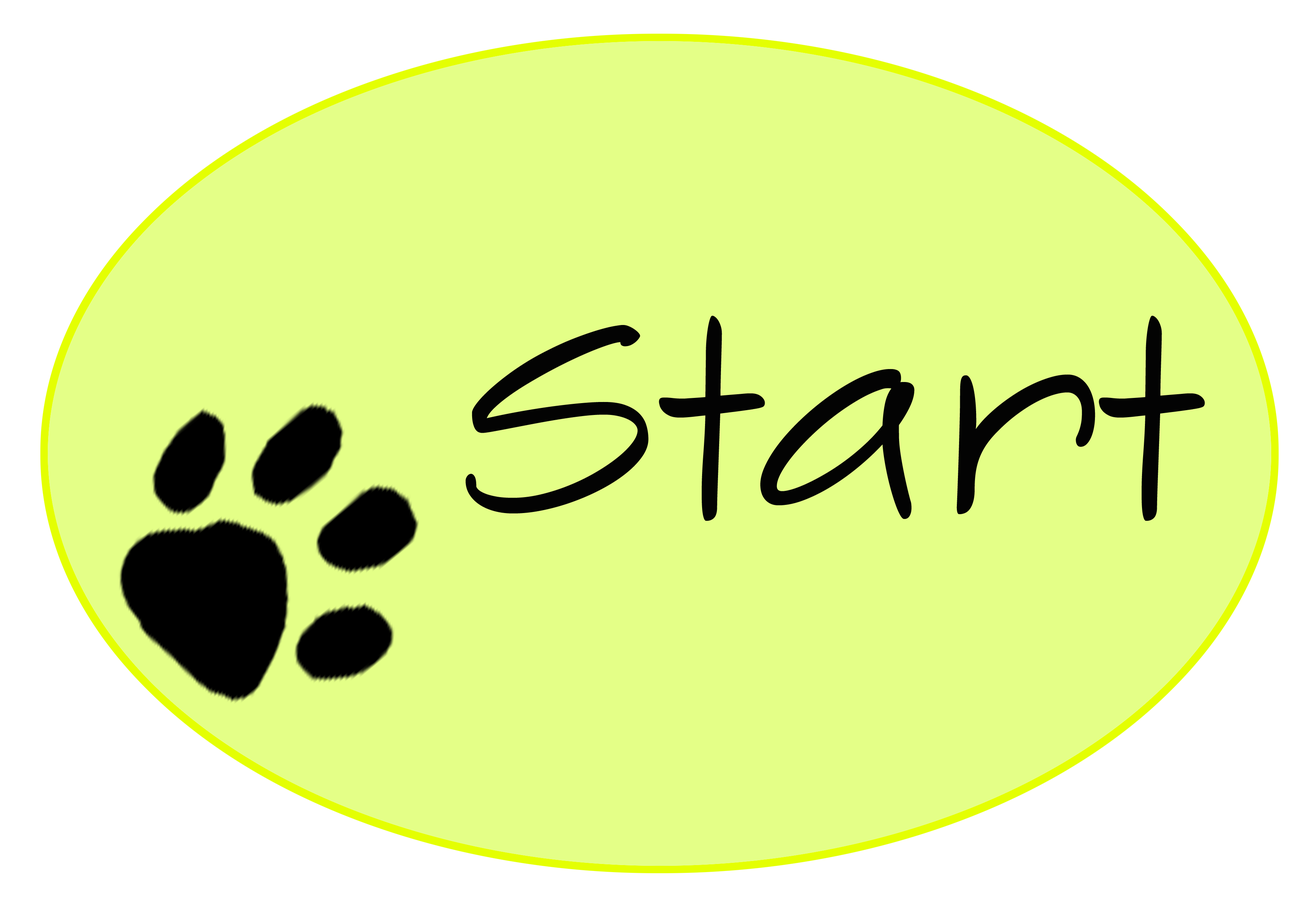
<style>
.page{position:relative;width:1299px;height:918px;background:#e4ff87}
.page>*{position:absolute;margin:0}
.t1{font:277.7px "SketchFlowPrint";color:#030303}
</style>
<div class="page">
<p class="t1" style="left:465px;top:315px;width:740px;height:206px">Start</p>
</div>
